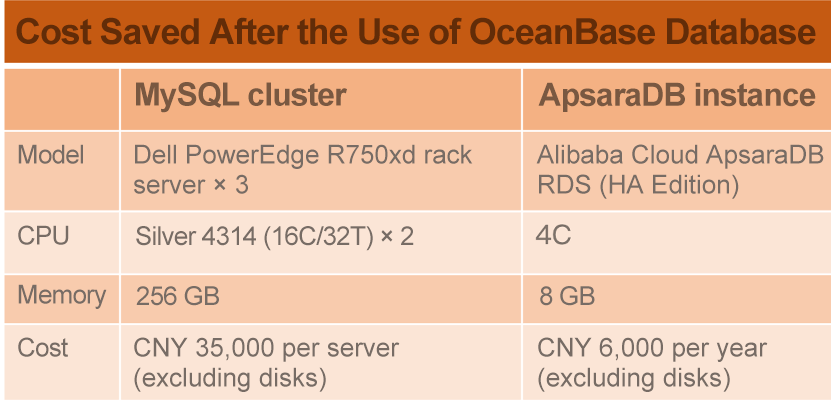
<style>
.page{position:relative;width:831px;height:403px;background:#fbe5d6}
.page>*{position:absolute;margin:0}
.t1{font:36px "Arial-BoldMT";letter-spacing:-0.03em;color:#622c08}
.t2{font:32px "Arial-BoldMT";letter-spacing:-0.03em;color:#795841}
.t3{font:26px "ArialMT";letter-spacing:-0.03em;color:#776c65}
.t4{font:26px/30px "ArialMT";color:#776c65}
.t5{font:26px/26px "ArialMT";letter-spacing:-0.03em;color:#776c65}
</style>
<div class="page">
<p class="t1" style="left:16px;top:17px;width:800px;height:28px">Cost Saved After the Use of OceanBase Database</p>
<p class="t2" style="left:136px;top:82px;width:211px;height:31px">MySQL cluster</p>
<p class="t2" style="left:538px;top:82px;width:278px;height:30px">ApsaraDB instance</p>
<p class="t3" style="left:18px;top:144px;width:65px;height:20px">Model</p>
<p class="t4" style="left:134px;top:144px;width:339px;height:50px">Dell PowerEdge R750xd rack server × 3</p>
<p class="t4" style="left:536px;top:144px;width:288px;height:55px">Alibaba Cloud ApsaraDB RDS (HA Edition)</p>
<p class="t3" style="left:18px;top:225px;width:51px;height:20px">CPU</p>
<p class="t3" style="left:136px;top:226px;width:278px;height:25px">Silver 4314 (16C/32T) × 2</p>
<p class="t5" style="left:18px;top:284px;width:89px;height:73px">Memory<br>Cost</p>
<p class="t3" style="left:136px;top:286px;width:83px;height:20px">256 GB</p>
<p class="t3" style="left:540px;top:286px;width:55px;height:20px">8 GB</p>
<p class="t4" style="left:134px;top:337px;width:266px;height:55px">CNY 35,000 per server (excluding disks)</p>
<p class="t4" style="left:538px;top:337px;width:230px;height:55px">CNY 6,000 per year (excluding disks)</p>
</div>
